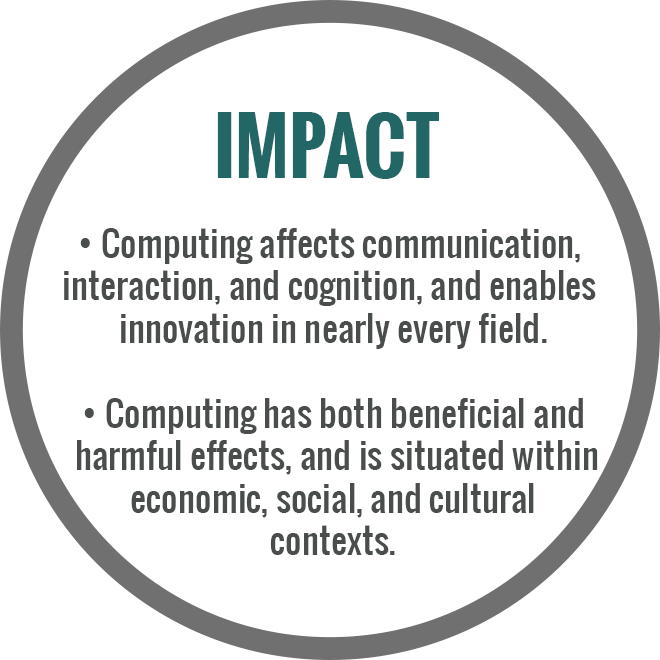
<style>
.page{position:relative;width:660px;height:660px;background:#ffffff}
.page>*{position:absolute;margin:0}
.t1{font:75px "Oswald-Bold";color:#236666}
.t2{font:35.4px "Oswald-Regular";color:#494d4c}
</style>
<div class="page">
<p class="t1" style="left:217px;top:112px;width:222px;height:67px">IMPACT</p>
<p class="t2" style="left:64px;top:228px;width:534px;height:327px;text-align:center">• Computing affects communication, <br>interaction, and cognition, and enables <br>innovation in nearly every field.<br><br>• Computing has both beneficial and<br> harmful effects, and is situated within<br> economic, social, and cultural <br>contexts.</p>
</div>
